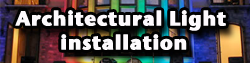
<style>
.page{position:relative;width:250px;height:63px}
.page>*{position:absolute;margin:0}
.t1{font:20px/24px "StoneSansITCTTBold";letter-spacing:0.01em;color:#fdfafd;font-weight:bold}
</style>
<div class="page">
<p class="t1" style="left:15px;top:10px;width:211px;height:40px;text-align:center">Architectural Light<br> installation</p>
</div>
